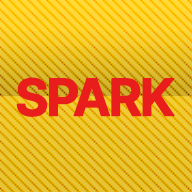
<style>
.page{position:relative;width:192px;height:192px}
.page>*{position:absolute;margin:0}
.t1{font:52.5px "Pretendard-Bold";letter-spacing:-0.05em;color:#ea1d1d;font-weight:bold}
</style>
<div class="page">
<p class="t1" style="left:16px;top:77px;width:159px;height:40px">SPARK</p>
</div>
